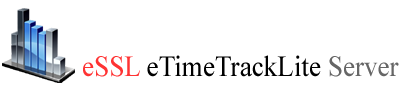
<style>
.page{position:relative;width:405px;height:85px;background:#ffffff}
.page>*{position:absolute;margin:0}
.t1{font:29.4px "TimesNewRomanPSMT";color:#000000;scale:0.92 1}
.t2{font:29.4px "TimesNewRomanPSMT";color:#ff3333;scale:0.92 1}
.t3{font:29.4px "TimesNewRomanPSMT";color:#666666;scale:0.92 1}
</style>
<div class="page">
<p class="t1" style="left:83px;top:55px;width:316px;height:22px"><span class="t2">eSSL</span> eTimeTrackLite <span class="t3">Server</span></p>
</div>
